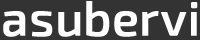
<style>
.page{position:relative;width:200px;height:40px;background:#333333}
.page>*{position:absolute;margin:0}
.t1{font:48px "Exo2-Medium";color:#ffffff;font-weight:bold}
</style>
<div class="page">
<p class="t1" style="left:3px;top:1px;width:195px;height:36px">asubervi</p>
</div>
